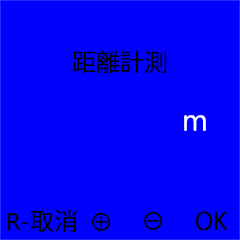
<style>
.page{position:relative;width:240px;height:240px;background:#0000ff}
.page>*{position:absolute;margin:0}
.t1{font:23.8px "KozGoPr6N-Regular";color:#000000}
.t2{font:30px "MicrosoftNewTaiLue";color:#ffffff}
.t3{font:23.8px "MicrosoftNewTaiLue";color:#000000}
.t4{font:24px "KozGoPr6N-Regular";color:#000000}
</style>
<div class="page">
<p class="t1" style="left:72px;top:50px;width:95px;height:24px">距離計測</p>
<p class="t2" style="left:184px;top:115px;width:22px;height:16px">m</p>
<p class="t3" style="left:8px;top:209px;width:70px;height:23px">R-<span class="t1">取消</span></p>
<p class="t4" style="left:92px;top:212px;width:18px;height:19px">⊕</p>
<p class="t1" style="left:144px;top:212px;width:18px;height:18px">⊖</p>
<p class="t1" style="left:195px;top:211px;width:33px;height:20px">OK</p>
</div>
